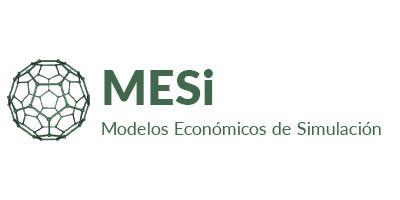
<style>
.page{position:relative;width:400px;height:200px;background:#ffffff}
.page>*{position:absolute;margin:0}
.t1{font:18px/30px "Lato-Regular";color:#41674c}
.t2{font:48px/30px "Lato-Black";color:#41674c}
</style>
<div class="page">
<p class="t1" style="left:102px;top:69px;width:279px;height:66px"><span class="t2">MESi<br></span>Modelos Económicos de Simulación</p>
</div>
